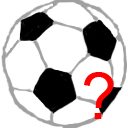
<style>
.page{position:relative;width:128px;height:128px;background:#ffffff}
.page>*{position:absolute;margin:0}
.t1{font:64px "ArialMT";color:#fe0000}
</style>
<div class="page">
<p class="t1" style="left:84px;top:72px;width:30px;height:47px">?</p>
</div>
